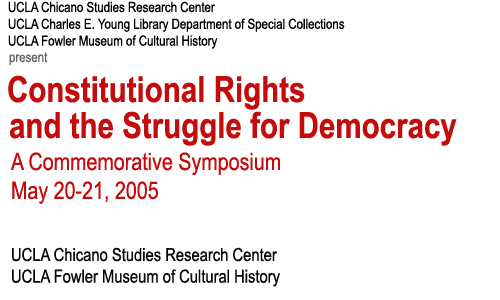
<style>
.page{position:relative;width:500px;height:300px;background:#ffffff}
.page>*{position:absolute;margin:0}
.t1{font:14px "ArialNarrow";color:#000000}
.t2{font:14px "ArialNarrow";color:#696363}
.t3{font:36px "ArialNarrow-Bold";color:#c40c0c}
.t4{font:24px "ArialNarrow";color:#c40c0c}
.t5{font:18px "ArialNarrow";color:#070707}
</style>
<div class="page">
<p class="t1" style="left:8px;top:1px;width:337px;height:48px">UCLA Chicano Studies Research Center<br>UCLA Charles E. Young Library Department of Special Collections<br>UCLA Fowler Museum of Cultural History</p>
<p class="t2" style="left:9px;top:52px;width:39px;height:13px">present</p>
<p class="t3" style="left:8px;top:75px;width:297px;height:35px">Constitutional Rights</p>
<p class="t3" style="left:10px;top:111px;width:447px;height:35px">and the Struggle for Democracy</p>
<p class="t4" style="left:10px;top:152px;width:270px;height:52px">A Commemorative Symposium<br>May 20-21, 2005</p>
<p class="t5" style="left:12px;top:247px;width:268px;height:40px">UCLA Chicano Studies Research Center<br>UCLA Fowler Museum of Cultural History</p>
</div>
